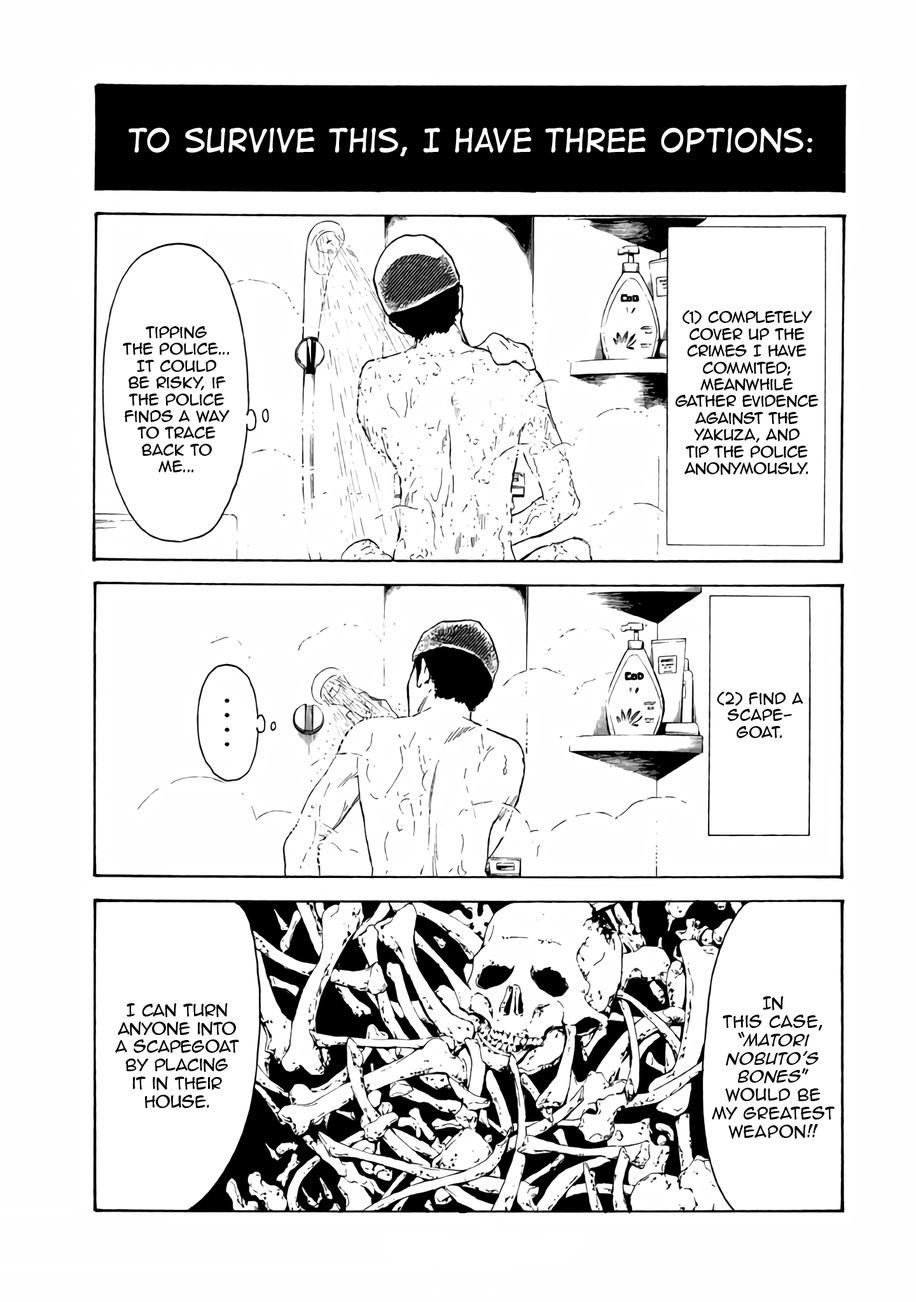
<style>
.page{position:relative;width:916px;height:1302px;background:#ffffff}
.page>*{position:absolute;margin:0}
.t1{font:30.5px "DigitalStrip";color:#ffffff}
.t2{font:14px "AnimeAce2.0BB";color:#000000}
.t3{font:15.3px "AnimeAce2.0BB";color:#000000}
.t4{font:15.3px "AnimeAce2.0BB-Italic";color:#000000}
</style>
<div class="page">
<p class="t1" style="left:128px;top:128px;width:684px;height:28px">To survive this, I have three options:</p>
<p class="t2" style="left:675px;top:310px;width:143px;height:165px;text-align:center">(1) completely cover up the crimes I have commited; meanwhile Gather evidence against the yakuza, and tip the police anonymously.</p>
<p class="t2" style="left:123px;top:326px;width:107px;height:146px;text-align:center">tipping <br>the police... It could be risky, if the police finds a way to trace back to me...</p>
<p class="t2" style="left:717px;top:692px;width:86px;height:46px;text-align:center">(2) Find a scape-<br>goat.</p>
<p class="t3" style="left:712px;top:996px;width:122px;height:143px;text-align:center">In <br>this case, “<span class="t4">Matori Nobuto’s Bones</span>” would be my greatest weapon!!</p>
<p class="t3" style="left:115px;top:1003px;width:124px;height:105px;text-align:center">I can turn anyone into a scapegoat by placing it in their house.</p>
</div>
